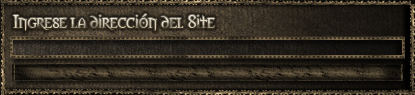
<style>
.page{position:relative;width:415px;height:95px}
.page>*{position:absolute;margin:0}
.t1{font:17px "Morpheus"}
</style>
<div class="page">
<p class="t1" style="left:13px;top:14px;width:202px;height:17px">Ingrese la dirección del Site</p>
</div>
